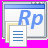
<style>
.page{position:relative;width:48px;height:48px}
.page>*{position:absolute;margin:0}
.t1{font:24px "Calibri-BoldItalic";color:#6797f4}
</style>
<div class="page">
<p class="t1" style="left:18px;top:10px;width:25px;height:19px">Rp</p>
</div>
